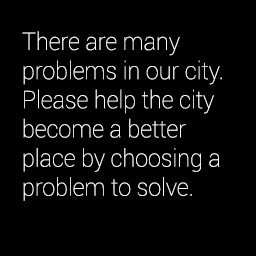
<style>
.page{position:relative;width:256px;height:256px;background:#000000}
.page>*{position:absolute;margin:0}
.t1{font:24.3px "Roboto-Thin";color:#ffffff;scale:0.96 1}
</style>
<div class="page">
<p class="t1" style="left:22px;top:31px;width:200px;height:170px">There are many problems in our city. Please help the city become a better place by choosing a problem to solve.</p>
</div>
